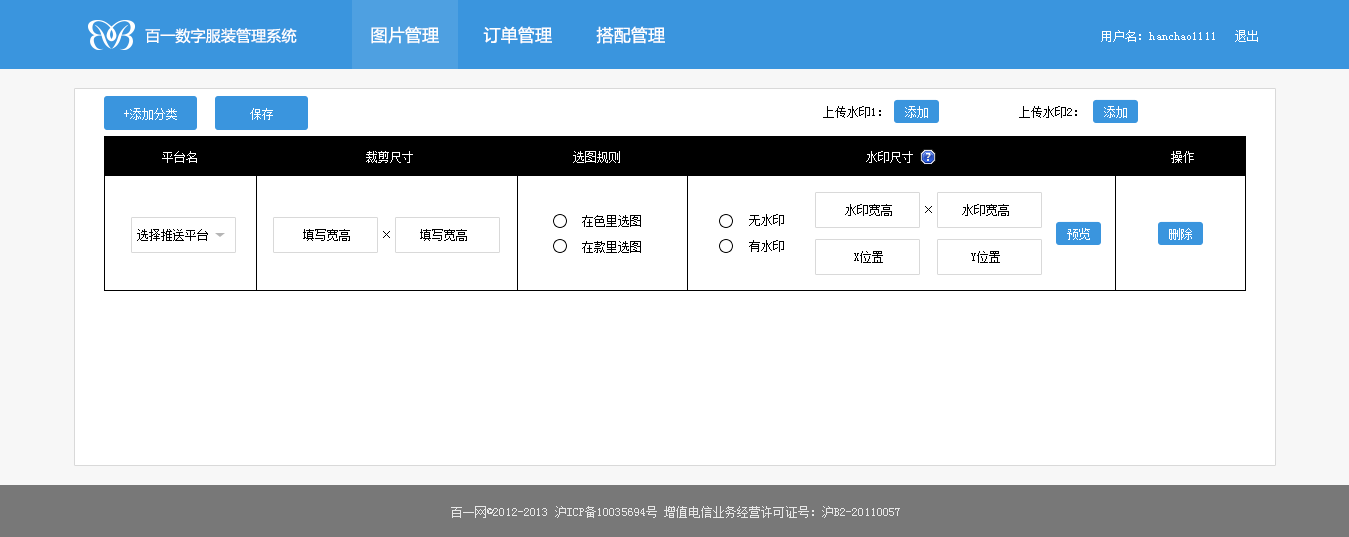
<style>
.page{position:relative;width:1349px;height:537px;background:#ffffff}
.page>*{position:absolute;margin:0}
.t1{font:15px "MicrosoftYaHei";letter-spacing:0.01em;color:#ffffff}
.t2{font:17px "MicrosoftYaHei";letter-spacing:0.01em;color:#ffffff}
.t3{font:12px "SimSun";letter-spacing:0.01em;color:#ffffff}
.t4{font:12px "SimSun";letter-spacing:0.01em;color:#010101}
.t5{font:12px "SimSun";letter-spacing:0.01em;color:#fefefe}
.t6{font:12px "SimSun";letter-spacing:0.01em;color:#000000}
.t7{font:12px "SimSun";letter-spacing:0.01em;color:#e8e8e8}
</style>
<div class="page">
<p class="t1" style="left:145px;top:28px;width:152px;height:16px">百一数字服装管理系统</p>
<p class="t2" style="left:371px;top:26px;width:68px;height:18px">图片管理</p>
<p class="t2" style="left:483px;top:26px;width:69px;height:18px">订单管理</p>
<p class="t2" style="left:596px;top:26px;width:69px;height:18px">搭配管理</p>
<p class="t3" style="left:1101px;top:30px;width:114px;height:12px">用户名：hanchao1111</p>
<p class="t3" style="left:1235px;top:30px;width:23px;height:12px">退出</p>
<p class="t3" style="left:124px;top:108px;width:53px;height:12px">+添加分类</p>
<p class="t3" style="left:250px;top:108px;width:23px;height:12px">保存</p>
<p class="t4" style="left:823px;top:106px;width:58px;height:12px">上传水印1：</p>
<p class="t3" style="left:905px;top:106px;width:23px;height:12px">添加</p>
<p class="t4" style="left:1019px;top:106px;width:58px;height:12px">上传水印2：</p>
<p class="t3" style="left:1104px;top:106px;width:23px;height:12px">添加</p>
<p class="t5" style="left:162px;top:151px;width:35px;height:12px">平台名</p>
<p class="t5" style="left:366px;top:151px;width:47px;height:12px">裁剪尺寸</p>
<p class="t5" style="left:573px;top:151px;width:47px;height:12px">选图规则</p>
<p class="t5" style="left:866px;top:151px;width:47px;height:12px">水印尺寸</p>
<p class="t5" style="left:1171px;top:151px;width:23px;height:12px">操作</p>
<p class="t6" style="left:845px;top:204px;width:47px;height:12px">水印宽高</p>
<p class="t6" style="left:925px;top:206px;width:7px;height:7px">×</p>
<p class="t6" style="left:962px;top:204px;width:47px;height:12px">水印宽高</p>
<p class="t6" style="left:582px;top:215px;width:59px;height:12px">在色里选图</p>
<p class="t6" style="left:749px;top:214px;width:35px;height:12px">无水印</p>
<p class="t6" style="left:137px;top:229px;width:71px;height:12px">选择推送平台</p>
<p class="t6" style="left:303px;top:229px;width:47px;height:12px">填写宽高</p>
<p class="t6" style="left:383px;top:231px;width:7px;height:7px">×</p>
<p class="t6" style="left:420px;top:229px;width:47px;height:12px">填写宽高</p>
<p class="t3" style="left:1067px;top:228px;width:23px;height:12px">预览</p>
<p class="t3" style="left:1169px;top:228px;width:23px;height:12px">删除</p>
<p class="t6" style="left:582px;top:241px;width:59px;height:12px">在款里选图</p>
<p class="t6" style="left:749px;top:240px;width:35px;height:12px">有水印</p>
<p class="t6" style="left:854px;top:251px;width:29px;height:12px">X位置</p>
<p class="t6" style="left:971px;top:251px;width:29px;height:12px">Y位置</p>
<p class="t7" style="left:451px;top:506px;width:449px;height:12px">百一网©2012-2013 沪ICP备10035694号 增值电信业务经营许可证号：沪B2-20110057</p>
</div>
